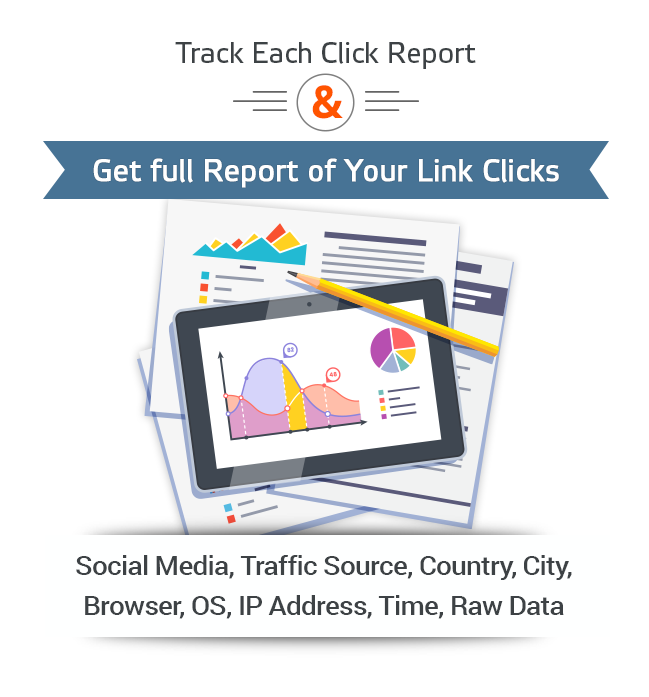
<style>
.page{position:relative;width:649px;height:697px;background:#ffffff}
.page>*{position:absolute;margin:0}
.t1{font:29px "ElektraTextPro";letter-spacing:-0.005em;color:#3d4245}
.t2{font:45.3px "OpenSans-Bold";letter-spacing:-0.005em;color:#ff5400;scale:0.94 1}
.t3{font:31px "ElektraTextPro";letter-spacing:-0.005em;color:#ffffff;font-weight:bold;scale:0.93 1}
.t4{font:26.4px/40px "Roboto-Medium";letter-spacing:-0.025em;color:#3d4245;scale:1.05 1}
</style>
<div class="page">
<p class="t1" style="left:175px;top:42px;width:301px;height:27px">Track Each Click Report</p>
<p class="t2" style="left:312px;top:85px;width:31px;height:34px">&amp;</p>
<p class="t3" style="left:93px;top:158px;width:466px;height:30px">Get full Report of Your Link Clicks</p>
<p class="t4" style="left:76px;top:555px;width:496px;height:64px;text-align:center">Social Media, Traffic Source, Country, City,<br>Browser, OS, IP Address, Time, Raw Data</p>
</div>
